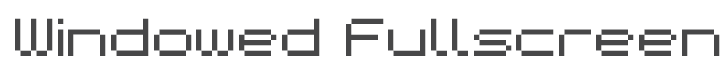
<style>
.page{position:relative;width:725px;height:69px;background:#ffffff}
.page>*{position:absolute;margin:0}
.t1{font:48px "BMspaceA9";color:#474748}
</style>
<div class="page">
<p class="t1" style="left:15px;top:18px;width:705px;height:38px">Windowed Fullscreen</p>
</div>
